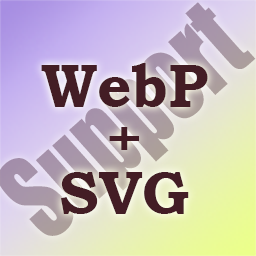
<style>
.page{position:relative;width:256px;height:256px}
.page>*{position:absolute;margin:0}
.t1{font:61.4px "BookmanOldStyle-Bold";color:#431d25}
.t2{font:49.4px "BookmanOldStyle-Bold";color:#431d25;scale:1.24 1}
</style>
<div class="page">
<p class="t1" style="left:41px;top:63px;width:167px;height:44px">WebP</p>
<p class="t2" style="left:109px;top:127px;width:30px;height:23px">+</p>
<p class="t1" style="left:61px;top:172px;width:128px;height:42px">SVG</p>
</div>
